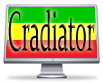
<style>
.page{position:relative;width:103px;height:83px}
.page>*{position:absolute;margin:0}
.t1{font:56.7px "Constantia";color:#000000;scale:0.38 1}
</style>
<div class="page">
<p class="t1" style="left:8px;top:8px;width:87px;height:44px">Cradiator</p>
</div>
